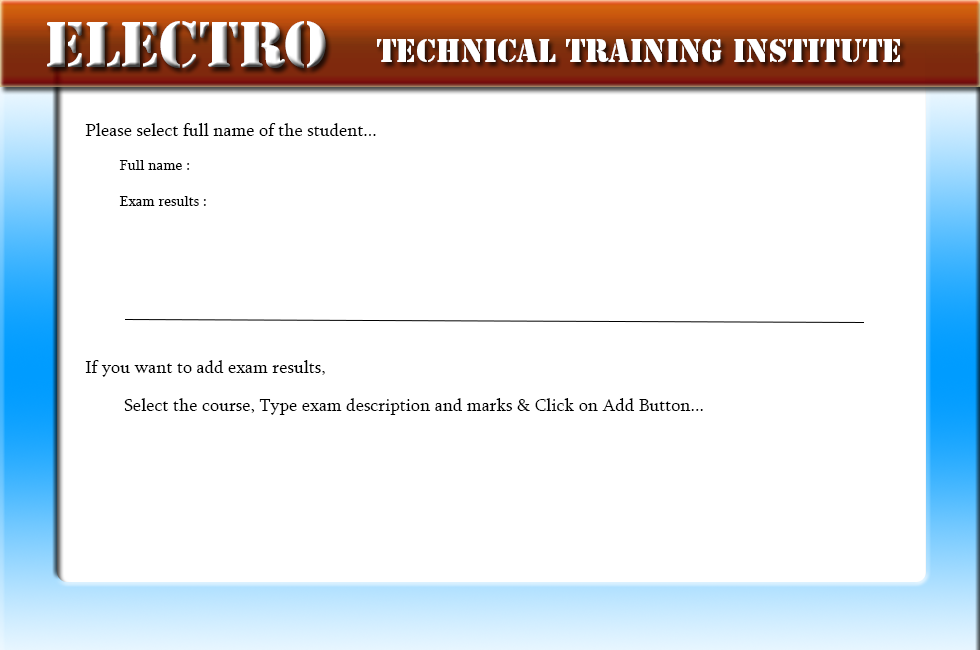
<style>
.page{position:relative;width:980px;height:650px;background:#ffffff}
.page>*{position:absolute;margin:0}
.t1{font:60px "StencilStd";color:#ffffff}
.t2{font:30px "StencilStd";color:#ffffff}
.t3{font:18px "Sylfaen";color:#000000}
.t4{font:15px "Sylfaen";color:#000000}
</style>
<div class="page">
<p class="t1" style="left:47px;top:21px;width:279px;height:47px">Electro</p>
<p class="t2" style="left:377px;top:39px;width:523px;height:23px">Technical Training Institute</p>
<p class="t3" style="left:85px;top:123px;width:291px;height:13px">Please select full name of the student...</p>
<p class="t4" style="left:119px;top:160px;width:87px;height:46px">Full name :<br><br>Exam results :</p>
<p class="t3" style="left:85px;top:360px;width:240px;height:17px">If you want to add exam results,</p>
<p class="t3" style="left:124px;top:398px;width:579px;height:17px">Select the course, Type exam description and marks &amp; Click on Add Button...</p>
</div>
